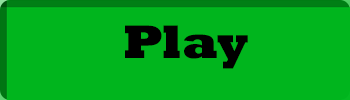
<style>
.page{position:relative;width:350px;height:100px;background:#00b51d}
.page>*{position:absolute;margin:0}
.t1{font:48.1px "Rockwell-ExtraBold";color:#000000}
</style>
<div class="page">
<p class="t1" style="left:125px;top:25px;width:123px;height:44px">Play</p>
</div>
